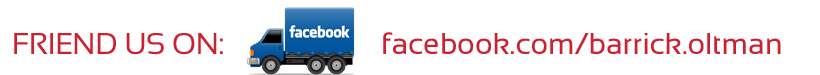
<style>
.page{position:relative;width:820px;height:75px;background:#ffffff}
.page>*{position:absolute;margin:0}
.t1{font:30px "Sansation-Regular";color:#cc2131}
</style>
<div class="page">
<p class="t1" style="left:14px;top:33px;width:209px;height:22px">FRIEND US ON:</p>
<p class="t1" style="left:383px;top:32px;width:398px;height:22px">facebook.com/barrick.oltman</p>
</div>
